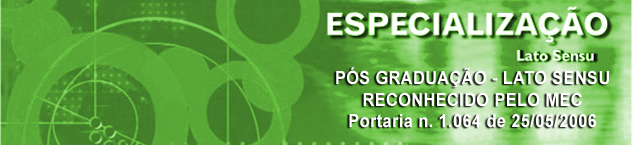
<style>
.page{position:relative;width:632px;height:145px}
.page>*{position:absolute;margin:0}
.t1{font:18px "Arial-BoldMT";letter-spacing:0.025em;color:#ffffff;scale:0.9 1}
</style>
<div class="page">
<p class="t1" style="left:336px;top:67px;width:273px;height:61px;text-align:center">PÓS GRADUAÇÃO - LATO SENSU<br>RECONHECIDO PELO MEC<br>Portaria n. 1.064 de 25/05/2006</p>
<p class="t1" style="left:336px;top:67px;width:273px;height:61px;text-align:center">PÓS GRADUAÇÃO - LATO SENSU<br>RECONHECIDO PELO MEC<br>Portaria n. 1.064 de 25/05/2006</p>
<p class="t1" style="left:336px;top:67px;width:273px;height:61px;text-align:center">PÓS GRADUAÇÃO - LATO SENSU<br>RECONHECIDO PELO MEC<br>Portaria n. 1.064 de 25/05/2006</p>
</div>
